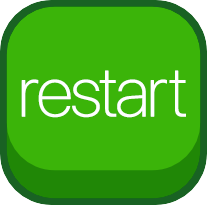
<style>
.page{position:relative;width:207px;height:205px;background:#3bb409}
.page>*{position:absolute;margin:0}
.t1{font:70.8px "SFProDisplay-Thin";letter-spacing:-0.04em;color:#ffffff;font-weight:bold}
</style>
<div class="page">
<p class="t1" style="left:21px;top:70px;width:165px;height:48px">restart</p>
</div>
